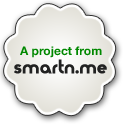
<style>
.page{position:relative;width:128px;height:128px;background:#ffffff}
.page>*{position:absolute;margin:0}
.t1{font:12px "HelveticaNeue-Bold";color:#008800}
.t2{font:17px "Moderna";color:#222222;font-weight:bold}
</style>
<div class="page">
<p class="t1" style="left:20px;top:46px;width:82px;height:12px">A project from</p>
<p class="t2" style="left:14px;top:59px;width:93px;height:15px">smartn.me</p>
</div>
